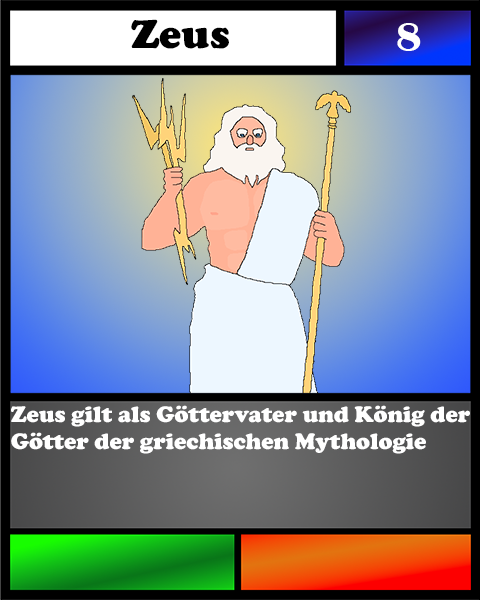
<style>
.page{position:relative;width:480px;height:600px}
.page>*{position:absolute;margin:0}
.t1{font:41.7px "CooperBlack";color:#000000}
.t2{font:41.7px "BritannicBold";color:#ffffff}
.t3{font:23.1px "CooperBlack";color:#ffffff}
</style>
<div class="page">
<p class="t1" style="left:131px;top:19px;width:98px;height:30px">Zeus</p>
<p class="t2" style="left:397px;top:23px;width:24px;height:28px">8</p>
<p class="t3" style="left:11px;top:405px;width:459px;height:49px">Zeus gilt als Göttervater und König der Götter der griechischen Mythologie</p>
</div>
